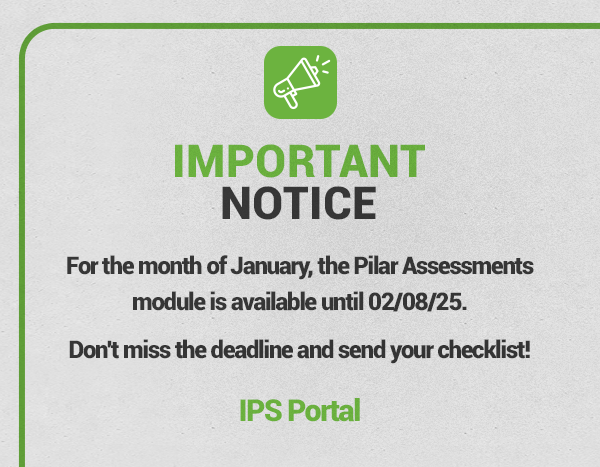
<style>
.page{position:relative;width:600px;height:467px}
.page>*{position:absolute;margin:0}
.t1{font:45.3px/41.9px "Roboto-Black";letter-spacing:0.01em;color:#6cb33f;text-transform:uppercase}
.t2{font:45.3px/41.9px "Roboto-Black";letter-spacing:0.01em;color:#383838;text-transform:uppercase}
.t3{font:24px/36px "Roboto-Black";letter-spacing:-0.05em;color:#373737}
.t4{font:24px "Roboto-Black";letter-spacing:-0.05em;color:#353535}
.t5{font:30.1px "Roboto-Black";letter-spacing:-0.05em;color:#6cb33f}
</style>
<div class="page">
<p class="t1" style="left:175px;top:144px;width:250px;height:76px;text-align:center">Important<br><span class="t2">Notice</span></p>
<p class="t3" style="left:67px;top:255px;width:467px;height:57px;text-align:center">For the month of January, the Pilar Assessments<br>module is available until 02/08/25.</p>
<p class="t4" style="left:69px;top:339px;width:461px;height:25px">Don't miss the deadline and send your checklist!</p>
<p class="t5" style="left:240px;top:398px;width:120px;height:24px">IPS Portal</p>
</div>
